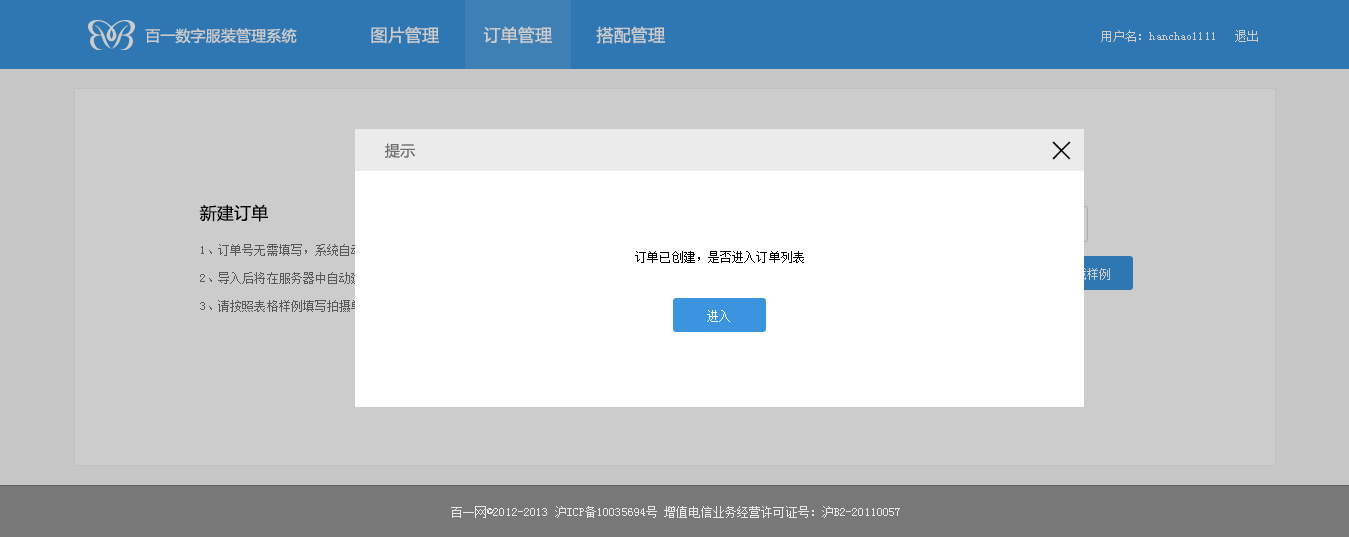
<style>
.page{position:relative;width:1349px;height:537px;background:#cccccc}
.page>*{position:absolute;margin:0}
.t1{font:15px "MicrosoftYaHei";letter-spacing:0.01em;color:#cccccc}
.t2{font:17px "MicrosoftYaHei";letter-spacing:0.01em;color:#cccccc}
.t3{font:12px "SimSun";letter-spacing:0.01em;color:#cccccc}
.t4{font:15px "MicrosoftYaHei";letter-spacing:0.01em;color:#6f6f6f}
.t5{font:30px "STXihei";letter-spacing:0.01em;color:#000000}
.t6{font:17px "MicrosoftYaHei";letter-spacing:0.01em;color:#000000}
.t7{font:12px/28px "SimSun";letter-spacing:0.01em;color:#6f6f6f}
.t8{font:12px "SimSun";letter-spacing:0.01em;color:#000000}
.t9{font:12px "SimSun";letter-spacing:0.01em}
.t10{font:12px "SimSun";letter-spacing:0.01em;color:#ffffff}
.t11{font:12px "SimSun";letter-spacing:0.01em;color:#e8e8e8}
</style>
<div class="page">
<p class="t1" style="left:145px;top:28px;width:152px;height:16px">百一数字服装管理系统</p>
<p class="t2" style="left:371px;top:26px;width:68px;height:18px">图片管理</p>
<p class="t2" style="left:483px;top:26px;width:69px;height:18px">订单管理</p>
<p class="t2" style="left:596px;top:26px;width:69px;height:18px">搭配管理</p>
<p class="t3" style="left:1101px;top:30px;width:114px;height:12px">用户名：hanchao1111</p>
<p class="t3" style="left:1235px;top:30px;width:23px;height:12px">退出</p>
<p class="t4" style="left:385px;top:143px;width:30px;height:15px">提示</p>
<p class="t5" style="left:1052px;top:141px;width:19px;height:19px">×</p>
<p class="t6" style="left:199px;top:204px;width:69px;height:18px">新建订单</p>
<p class="t7" style="left:200px;top:244px;width:344px;height:68px">1、订单号无需填写，系统自动生成<br>2、导入后将在服务器中自动建立有款号名的文件夹便于上传图片<br>3、请按照表格样例填写拍摄单</p>
<p class="t8" style="left:635px;top:251px;width:169px;height:12px">订单已创建，是否进入订单列表</p>
<p class="t9" style="left:1063px;top:268px;width:47px;height:12px">下载样例</p>
<p class="t10" style="left:707px;top:310px;width:23px;height:12px">进入</p>
<p class="t11" style="left:451px;top:506px;width:449px;height:12px">百一网©2012-2013 沪ICP备10035694号 增值电信业务经营许可证号：沪B2-20110057</p>
</div>
